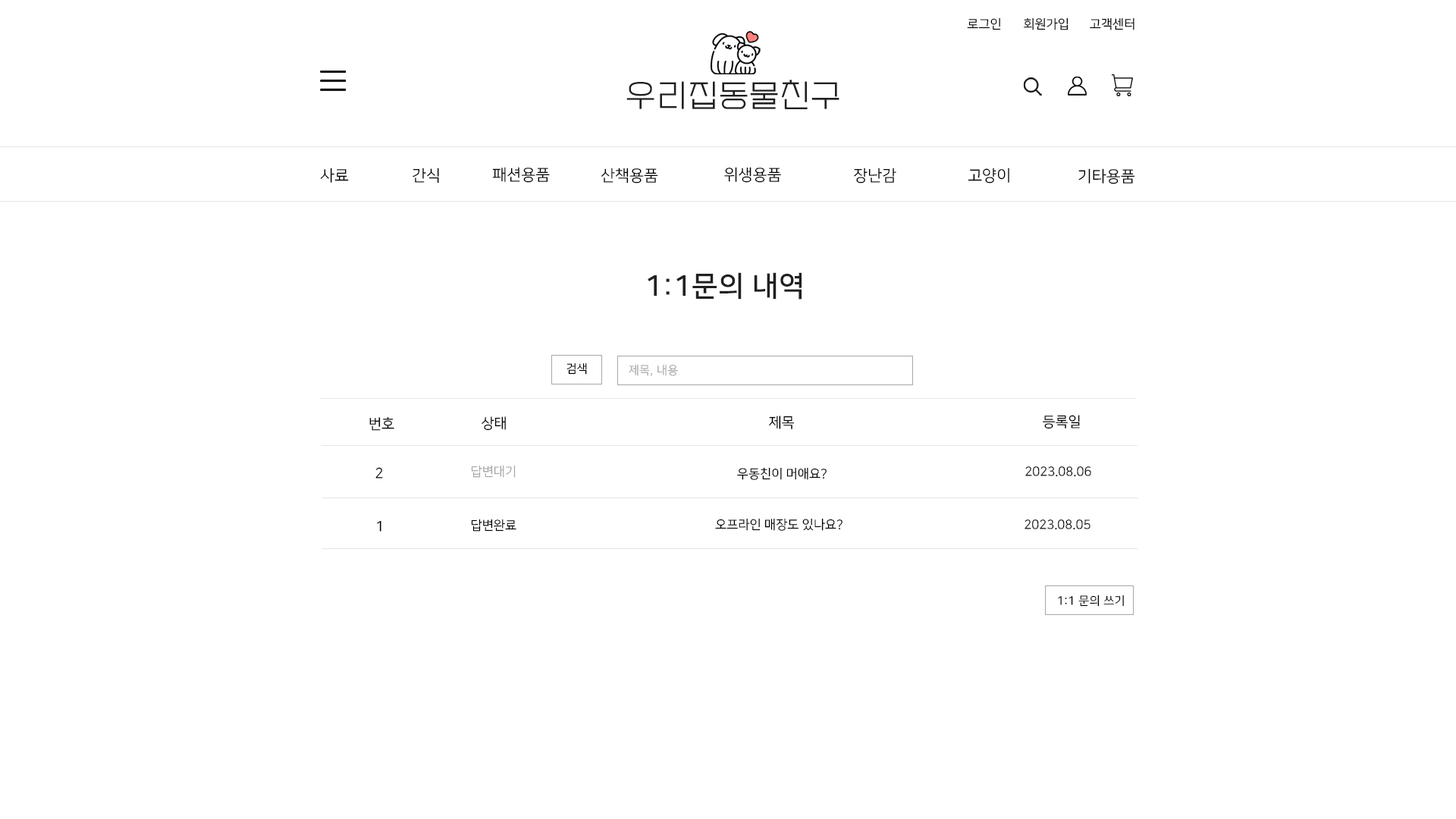
<style>
.page{position:relative;width:1456px;height:819px;background:#ffffff}
.page>*{position:absolute;margin:0}
.t1{font:12.6px "NanumSquareR";color:#000000}
.t2{font:31.6px "EF_watermelonSalad";letter-spacing:0.025em;color:#202020}
.t3{font:15.8px "NanumSquareR";color:#000000}
.t4{font:28.4px "NanumSquareB";letter-spacing:0.025em;color:#202020}
.t5{font:11.7px "NanumSquareR";letter-spacing:0.025em;color:#000000}
.t6{font:11.7px "NanumSquareR";letter-spacing:0.025em;color:#aaaaaa}
.t7{font:14.2px "NanumSquareR";color:#000000}
.t8{font:12.6px "NanumSquareR";color:#a8a8a8}
</style>
<div class="page">
<p class="t1" style="left:967px;top:17px;width:34px;height:13px">로그인</p>
<p class="t1" style="left:1024px;top:17px;width:44px;height:13px">회원가입</p>
<p class="t1" style="left:1090px;top:17px;width:44px;height:13px">고객센터</p>
<p class="t2" style="left:626px;top:80px;width:213px;height:29px">우리집동물친구</p>
<p class="t3" style="left:320px;top:168px;width:29px;height:15px">사료</p>
<p class="t3" style="left:413px;top:168px;width:26px;height:16px">간식</p>
<p class="t3" style="left:492px;top:167px;width:58px;height:16px">패션용품</p>
<p class="t3" style="left:601px;top:168px;width:57px;height:16px">산책용품</p>
<p class="t3" style="left:724px;top:167px;width:57px;height:16px">위생용품</p>
<p class="t3" style="left:854px;top:168px;width:42px;height:16px">장난감</p>
<p class="t3" style="left:968px;top:168px;width:41px;height:16px">고양이</p>
<p class="t3" style="left:1078px;top:168px;width:57px;height:16px">기타용품</p>
<p class="t4" style="left:648px;top:272px;width:154px;height:28px">1:1문의 내역</p>
<p class="t5" style="left:566px;top:362px;width:21px;height:13px">검색</p>
<p class="t6" style="left:629px;top:364px;width:49px;height:12px">제목, 내용</p>
<p class="t7" style="left:369px;top:417px;width:25px;height:14px">번호</p>
<p class="t7" style="left:482px;top:416px;width:24px;height:15px">상태</p>
<p class="t7" style="left:769px;top:416px;width:26px;height:13px">제목</p>
<p class="t7" style="left:1043px;top:415px;width:37px;height:14px">등록일</p>
<p class="t7" style="left:375px;top:467px;width:8px;height:12px">2</p>
<p class="t8" style="left:471px;top:465px;width:45px;height:13px">답변대기</p>
<p class="t1" style="left:737px;top:467px;width:90px;height:13px">우동친이 머애요?</p>
<p class="t1" style="left:1025px;top:466px;width:66px;height:11px">2023.08.06</p>
<p class="t7" style="left:377px;top:520px;width:4px;height:12px">1</p>
<p class="t1" style="left:471px;top:519px;width:45px;height:13px">답변완료</p>
<p class="t1" style="left:715px;top:518px;width:127px;height:13px">오프라인 매장도 있나요?</p>
<p class="t1" style="left:1024px;top:519px;width:66px;height:11px">2023.08.05</p>
<p class="t5" style="left:1058px;top:595px;width:66px;height:12px">1:1 문의 쓰기</p>
</div>
